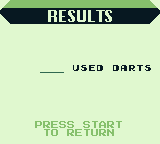
<style>
.page{position:relative;width:160px;height:144px;background:#e0f8cf}
.page>*{position:absolute;margin:0}
.t1{font:16px "Krungthep";color:#e0f8cf}
.t2{font:8px "Early-GameBoy";color:#071821}
.t3{font:8px/8px "PressStart2P-Regular";color:#86c06c}
</style>
<div class="page">
<p class="t1" style="left:48px;top:10px;width:64px;height:12px">RESULTS</p>
<p class="t2" style="left:73px;top:65px;width:78px;height:6px">Used  darts</p>
<p class="t3" style="left:35px;top:121px;width:87px;height:15px;text-align:center">PRESS START<br>TO RETURN</p>
</div>
